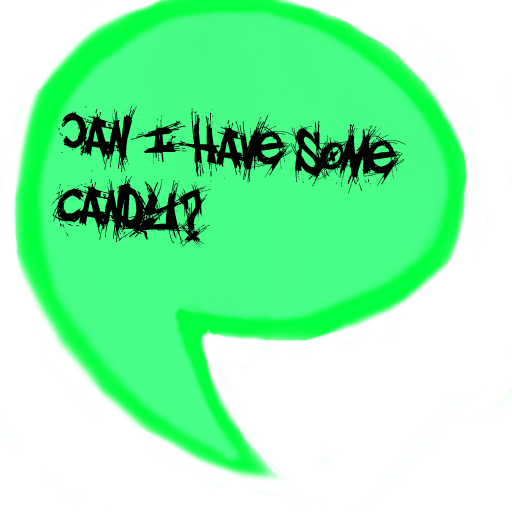
<style>
.page{position:relative;width:512px;height:512px;background:#ffffff}
.page>*{position:absolute;margin:0}
.t1{font:58.3px "el&fontgohtic!";color:#000000}
</style>
<div class="page">
<p class="t1" style="left:50px;top:105px;width:356px;height:143px;rotate:5deg">Can I have some candy?</p>
</div>
